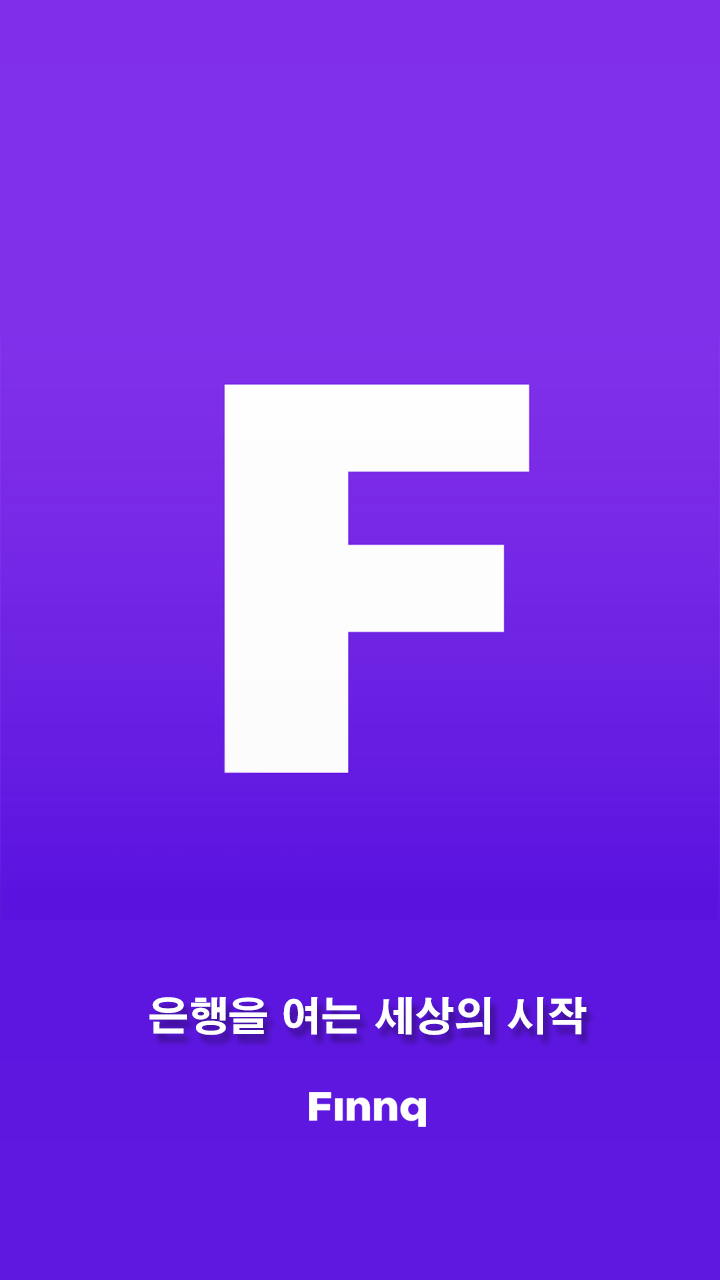
<style>
.page{position:relative;width:720px;height:1280px}
.page>*{position:absolute;margin:0}
.t1{font:40px "H2gtrE";color:#ffffff}
</style>
<div class="page">
<p class="t1" style="left:149px;top:997px;width:438px;height:38px">은행을 여는 세상의 시작</p>
</div>
